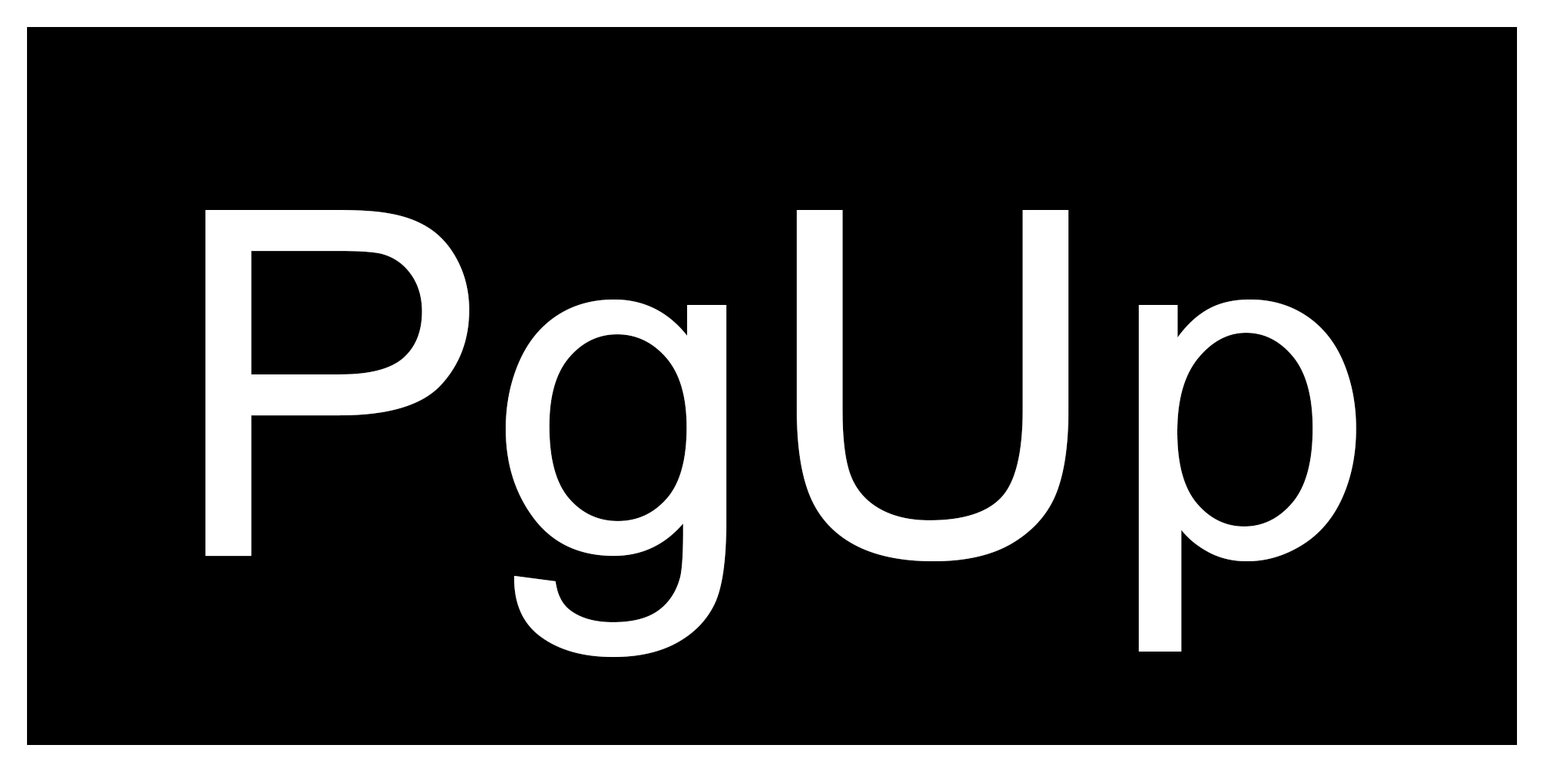
<style>
.page{position:relative;width:1544px;height:772px;background:#000000}
.page>*{position:absolute;margin:0}
.t1{font:482.6px "ArialMT";color:#ffffff}
</style>
<div class="page">
<p class="t1" style="left:205px;top:210px;width:1152px;height:447px">PgUp</p>
</div>
